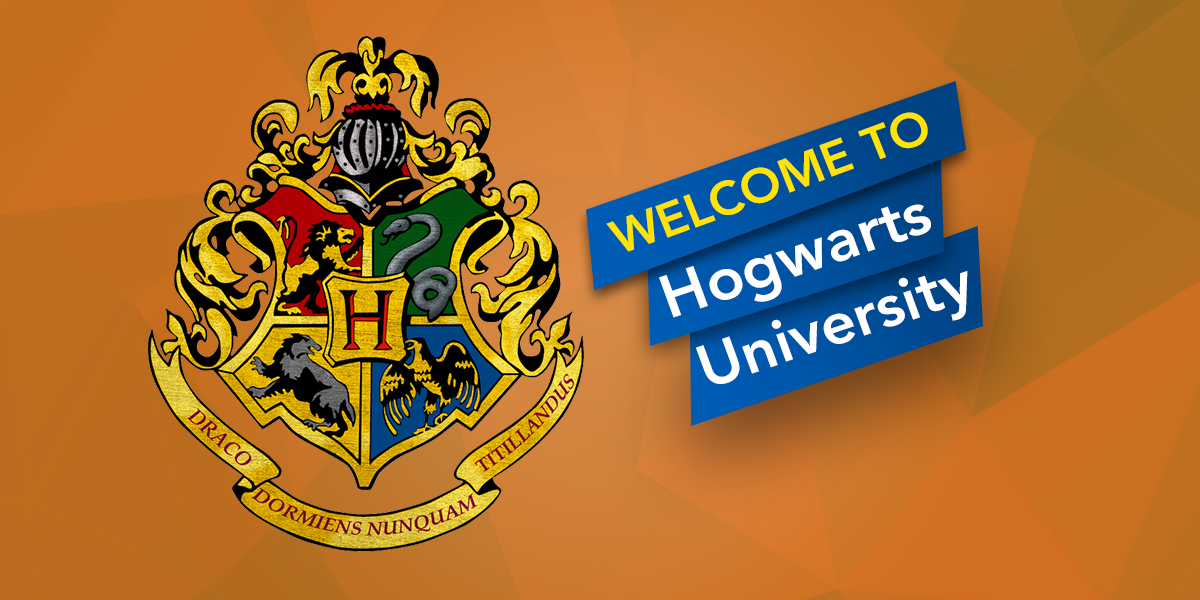
<style>
.page{position:relative;width:1200px;height:600px}
.page>*{position:absolute;margin:0}
.t1{font:47.4px "Avenir-Heavy";color:#ffe400;scale:1.03 1}
.t2{font:60px "Avenir-Heavy";color:#ffffff;scale:1.03 1}
.t3{font:59.5px "Avenir-Heavy";color:#ffffff;scale:1.03 1}
</style>
<div class="page">
<p class="t1" style="left:606px;top:112px;width:322px;height:140px;rotate:-20deg">WELCOME TO</p>
<p class="t2" style="left:659px;top:204px;width:272px;height:114px;rotate:-19deg">Hogwarts</p>
<p class="t3" style="left:696px;top:271px;width:272px;height:113px;rotate:-19deg">University</p>
</div>
